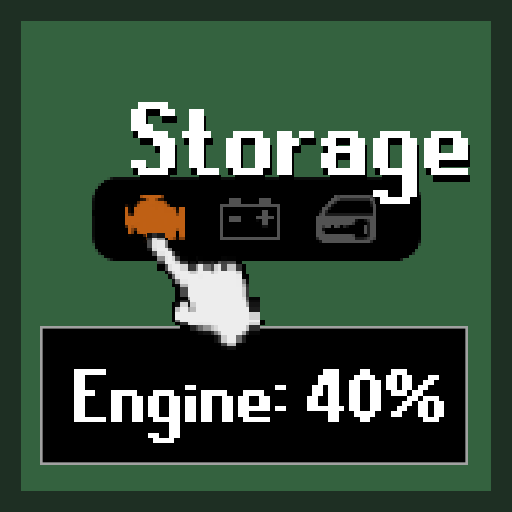
<style>
.page{position:relative;width:512px;height:512px;background:#34623f}
.page>*{position:absolute;margin:0}
.t1{font:117.2px "RuneScape-UF";color:#ffffff}
.t2{font:84.1px "RuneScape-UF";color:#ffffff}
</style>
<div class="page">
<p class="t1" style="left:131px;top:102px;width:337px;height:102px">Storage</p>
<p class="t2" style="left:74px;top:369px;width:370px;height:74px">Engine: 40%</p>
</div>
